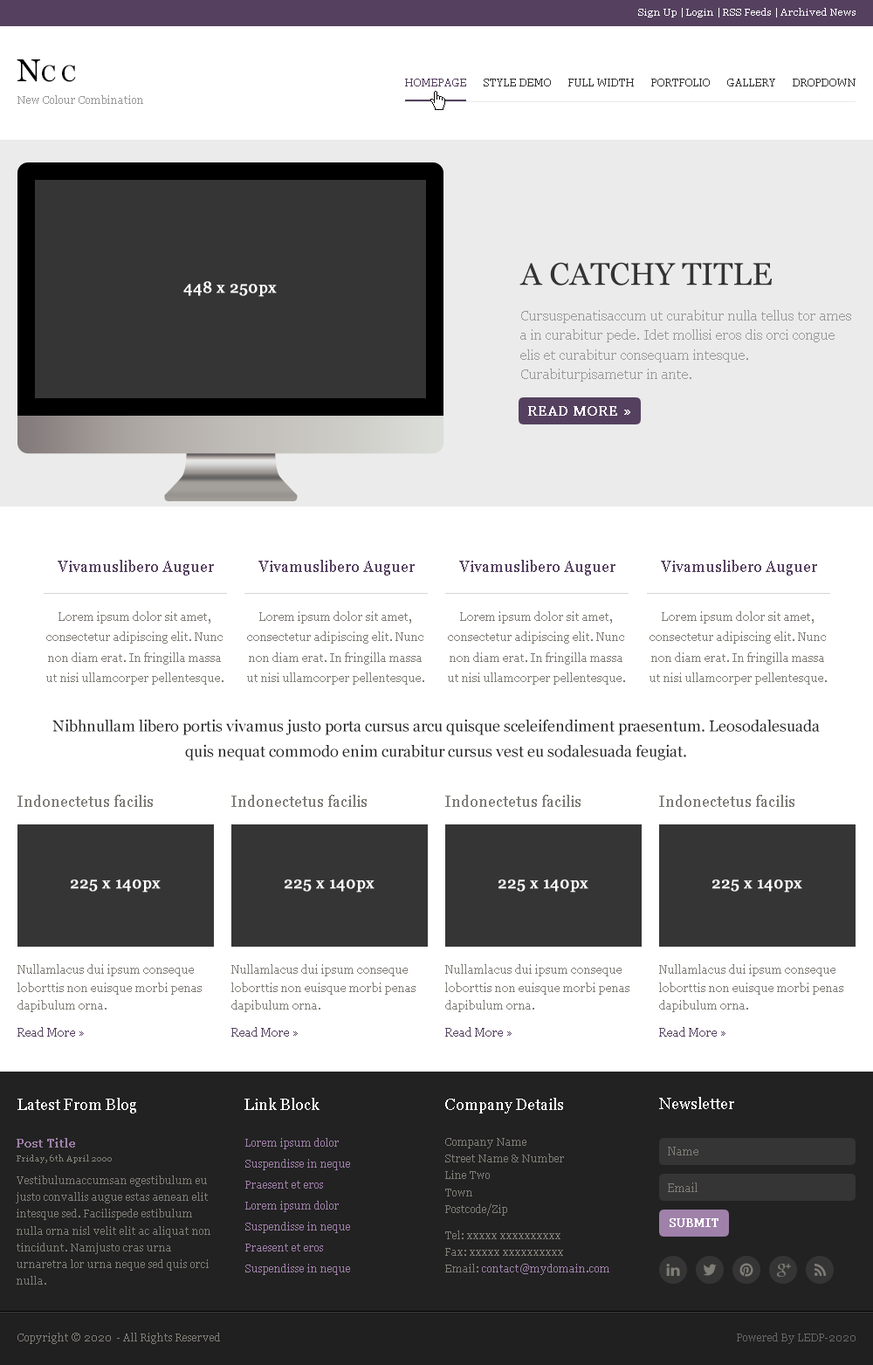
<style>
.page{position:relative;width:873px;height:1365px;background:#ffffff}
.page>*{position:absolute;margin:0}
.t1{font:9.6px "Georgia";color:#ffffff}
.t2{font:22.7px "Georgia";color:#000000}
.t3{font:31.4px "Georgia";color:#000000}
.t4{font:10.5px "Georgia";color:#55415f}
.t5{font:10.5px "Georgia";color:#333333}
.t6{font:10.5px "Georgia";color:#999999}
.t7{font:31.4px "Georgia";color:#333333}
.t8{font:15.7px "Georgia";color:#ffffff;font-weight:bold}
.t9{font:14px/19.6px "Georgia";color:#999999}
.t10{font:14px "Georgia";color:#ffffff;font-weight:bold}
.t11{font:15.7px "Georgia";color:#55415f}
.t12{font:11.4px/20.4px "Georgia";color:#807d77}
.t13{font:15.7px/25.2px "Georgia";color:#222222}
.t14{font:15.7px "Georgia";color:#7f7d77}
.t15{font:11.4px/18.2px "Georgia";color:#807d77}
.t16{font:11.4px "Georgia";color:#55415f}
.t17{font:15.7px "Georgia";color:#ffffff}
.t18{font:11.4px "Georgia";color:#9f81a9;font-weight:bold}
.t19{font:10.5px/21px "Georgia";color:#9f80a9}
.t20{font:10.5px/16.8px "Georgia";color:#807d77}
.t21{font:8.7px "Georgia";color:#807d77}
.t22{font:11.4px "Georgia";color:#807d77}
.t23{font:11.4px "Georgia";color:#ffffff;font-weight:bold}
.t24{font:10.5px/16.8px "Georgia";color:#9f81a9}
.t25{font:10.5px "Georgia";color:#807d77}
.t26{font:10.5px "Georgia";color:#666666}
</style>
<div class="page">
<p class="t1" style="left:638px;top:8px;width:218px;height:9px">Sign Up | Login | RSS Feeds | Archived News</p>
<p class="t2" style="left:17px;top:59px;width:59px;height:23px"><span class="t3">N</span>C C</p>
<p class="t4" style="left:405px;top:79px;width:61px;height:7px">HOMEPAGE</p>
<p class="t5" style="left:484px;top:79px;width:67px;height:7px">STYLE DEMO</p>
<p class="t5" style="left:569px;top:79px;width:65px;height:7px">FULL WIDTH</p>
<p class="t5" style="left:652px;top:79px;width:58px;height:7px">PORTFOLIO</p>
<p class="t5" style="left:728px;top:79px;width:48px;height:7px">GALLERY</p>
<p class="t5" style="left:793px;top:79px;width:63px;height:7px">DROPDOWN</p>
<p class="t6" style="left:17px;top:95px;width:126px;height:9px">New Colour Combination</p>
<p class="t7" style="left:520px;top:262px;width:252px;height:24px">A CATCHY TITLE</p>
<p class="t8" style="left:183px;top:281px;width:94px;height:16px">448 x 250px</p>
<p class="t9" style="left:521px;top:310px;width:331px;height:72px">Cursuspenatisaccum ut curabitur nulla tellus tor ames a in curabitur pede. Idet mollisi eros dis orci congue elis et curabitur consequam intesque. Curabiturpisametur in ante.</p>
<p class="t10" style="left:528px;top:406px;width:103px;height:10px">READ MORE »</p>
<p class="t11" style="left:58px;top:560px;width:156px;height:16px">Vivamuslibero Auguer</p>
<p class="t11" style="left:259px;top:560px;width:156px;height:16px">Vivamuslibero Auguer</p>
<p class="t11" style="left:459px;top:560px;width:157px;height:16px">Vivamuslibero Auguer</p>
<p class="t11" style="left:661px;top:560px;width:157px;height:16px">Vivamuslibero Auguer</p>
<p class="t12" style="left:46px;top:611px;width:178px;height:74px;text-align:center">Lorem ipsum dolor sit amet, consectetur adipiscing elit. Nunc non diam erat. In fringilla massa ut nisi ullamcorper pellentesque.</p>
<p class="t12" style="left:247px;top:611px;width:177px;height:74px;text-align:center">Lorem ipsum dolor sit amet, consectetur adipiscing elit. Nunc non diam erat. In fringilla massa ut nisi ullamcorper pellentesque.</p>
<p class="t12" style="left:448px;top:611px;width:177px;height:74px;text-align:center">Lorem ipsum dolor sit amet, consectetur adipiscing elit. Nunc non diam erat. In fringilla massa ut nisi ullamcorper pellentesque.</p>
<p class="t12" style="left:650px;top:611px;width:177px;height:74px;text-align:center">Lorem ipsum dolor sit amet, consectetur adipiscing elit. Nunc non diam erat. In fringilla massa ut nisi ullamcorper pellentesque.</p>
<p class="t13" style="left:52px;top:719px;width:768px;height:42px;text-align:center">Nibhnullam libero portis vivamus justo porta cursus arcu quisque sceleifendiment praesentum. Leosodalesuada quis nequat commodo enim curabitur cursus vest eu sodalesuada feugiat.</p>
<p class="t14" style="left:17px;top:795px;width:136px;height:12px">Indonectetus facilis</p>
<p class="t14" style="left:231px;top:795px;width:136px;height:12px">Indonectetus facilis</p>
<p class="t14" style="left:445px;top:795px;width:136px;height:12px">Indonectetus facilis</p>
<p class="t14" style="left:659px;top:795px;width:136px;height:12px">Indonectetus facilis</p>
<p class="t8" style="left:71px;top:880px;width:90px;height:13px">225 x 140px</p>
<p class="t8" style="left:285px;top:880px;width:90px;height:13px">225 x 140px</p>
<p class="t8" style="left:499px;top:880px;width:90px;height:13px">225 x 140px</p>
<p class="t8" style="left:713px;top:880px;width:90px;height:13px">225 x 140px</p>
<p class="t15" style="left:17px;top:964px;width:185px;height:48px">Nullamlacus dui ipsum conseque loborttis non euisque morbi penas dapibulum orna.</p>
<p class="t15" style="left:231px;top:964px;width:185px;height:48px">Nullamlacus dui ipsum conseque loborttis non euisque morbi penas dapibulum orna.</p>
<p class="t15" style="left:445px;top:964px;width:185px;height:48px">Nullamlacus dui ipsum conseque loborttis non euisque morbi penas dapibulum orna.</p>
<p class="t15" style="left:659px;top:964px;width:185px;height:48px">Nullamlacus dui ipsum conseque loborttis non euisque morbi penas dapibulum orna.</p>
<p class="t16" style="left:17px;top:1027px;width:67px;height:10px">Read More »</p>
<p class="t16" style="left:231px;top:1027px;width:67px;height:10px">Read More »</p>
<p class="t16" style="left:445px;top:1027px;width:67px;height:10px">Read More »</p>
<p class="t16" style="left:659px;top:1027px;width:67px;height:10px">Read More »</p>
<p class="t17" style="left:17px;top:1098px;width:119px;height:16px">Latest From Blog</p>
<p class="t17" style="left:245px;top:1098px;width:75px;height:12px">Link Block</p>
<p class="t17" style="left:445px;top:1098px;width:118px;height:16px">Company Details</p>
<p class="t17" style="left:659px;top:1097px;width:76px;height:12px">Newsletter</p>
<p class="t18" style="left:17px;top:1138px;width:58px;height:10px">Post Title</p>
<p class="t19" style="left:245px;top:1138px;width:105px;height:137px">Lorem ipsum dolor<br>Suspendisse in neque<br>Praesent et eros<br>Lorem ipsum dolor<br>Suspendisse in neque<br>Praesent et eros<br>Suspendisse in neque</p>
<p class="t20" style="left:445px;top:1138px;width:119px;height:78px">Company Name<br>Street Name &amp; Number<br>Line Two<br>Town<br>Postcode/Zip</p>
<p class="t21" style="left:17px;top:1155px;width:95px;height:8px">Friday, 6th April 2000</p>
<p class="t22" style="left:668px;top:1147px;width:31px;height:9px">Name</p>
<p class="t20" style="left:16px;top:1176px;width:195px;height:109px">Vestibulumaccumsan egestibulum eu justo convallis augue estas aenean elit intesque sed. Facilispede estibulum nulla orna nisl velit elit ac aliquat non tincidunt. Namjusto cras urna urnaretra lor urna neque sed quis orci nulla.</p>
<p class="t22" style="left:668px;top:1183px;width:30px;height:9px">Email</p>
<p class="t23" style="left:670px;top:1218px;width:49px;height:9px">SUBMIT</p>
<p class="t20" style="left:445px;top:1231px;width:165px;height:44px">Tel: xxxxx xxxxxxxxxx<br>Fax: xxxxx xxxxxxxxxx<br>Email: <span class="t24">contact@mydomain.com</span></p>
<p class="t25" style="left:17px;top:1333px;width:203px;height:11px">Copyright © 2020  - All Rights Reserved</p>
<p class="t26" style="left:737px;top:1333px;width:119px;height:11px">Powered By LEDP-2020</p>
</div>
